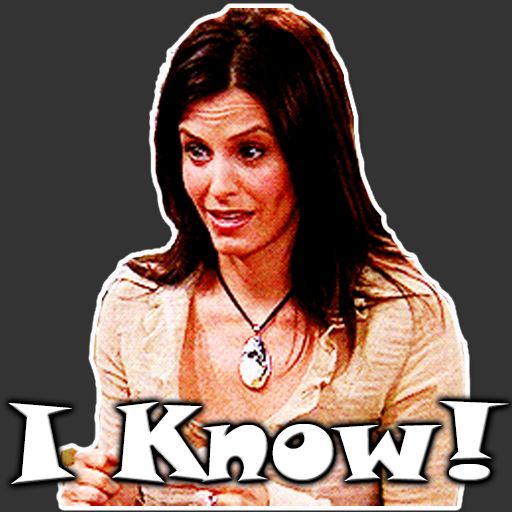
<style>
.page{position:relative;width:512px;height:512px;background:#333333}
.page>*{position:absolute;margin:0}
.t1{font:107px "SnapITC-Regular";color:#ffffff}
</style>
<div class="page">
<p class="t1" style="left:8px;top:401px;width:501px;height:83px">I Know!</p>
</div>
